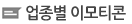
<style>
.page{position:relative;width:132px;height:24px;background:#ffffff}
.page>*{position:absolute;margin:0}
.t1{font:16px "NanumGothicBold";letter-spacing:-0.05em;color:#454545;scale:0.97 1}
</style>
<div class="page">
<p class="t1" style="left:26px;top:5px;width:100px;height:16px">업종별 이모티콘</p>
</div>
